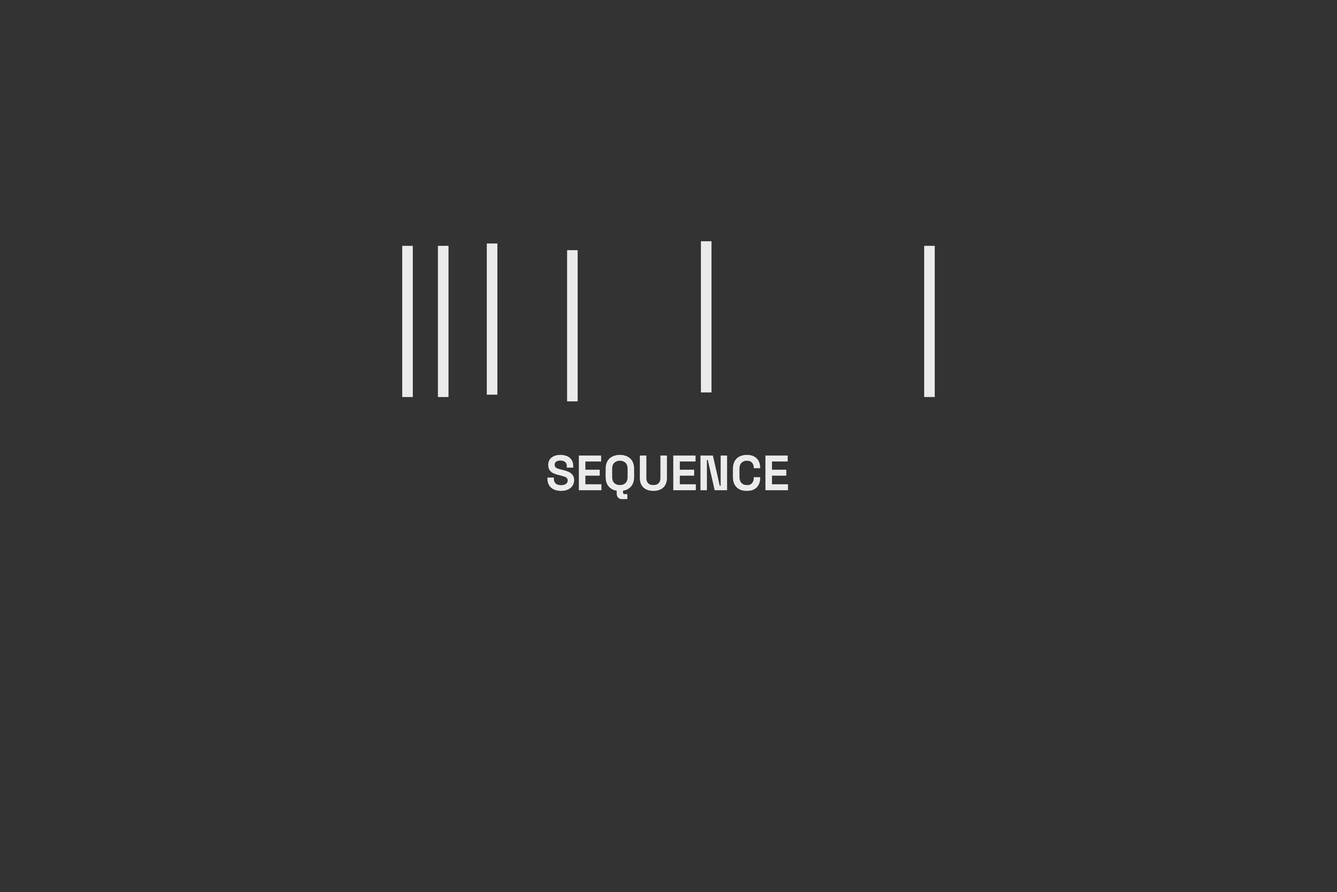
<style>
.page{position:relative;width:1337px;height:892px;background:#333333}
.page>*{position:absolute;margin:0}
.t1{font:49.5px "SpaceGroteskLight-Bold";color:#ebebeb}
</style>
<div class="page">
<p class="t1" style="left:547px;top:454px;width:241px;height:45px">SEQUENCE</p>
</div>
